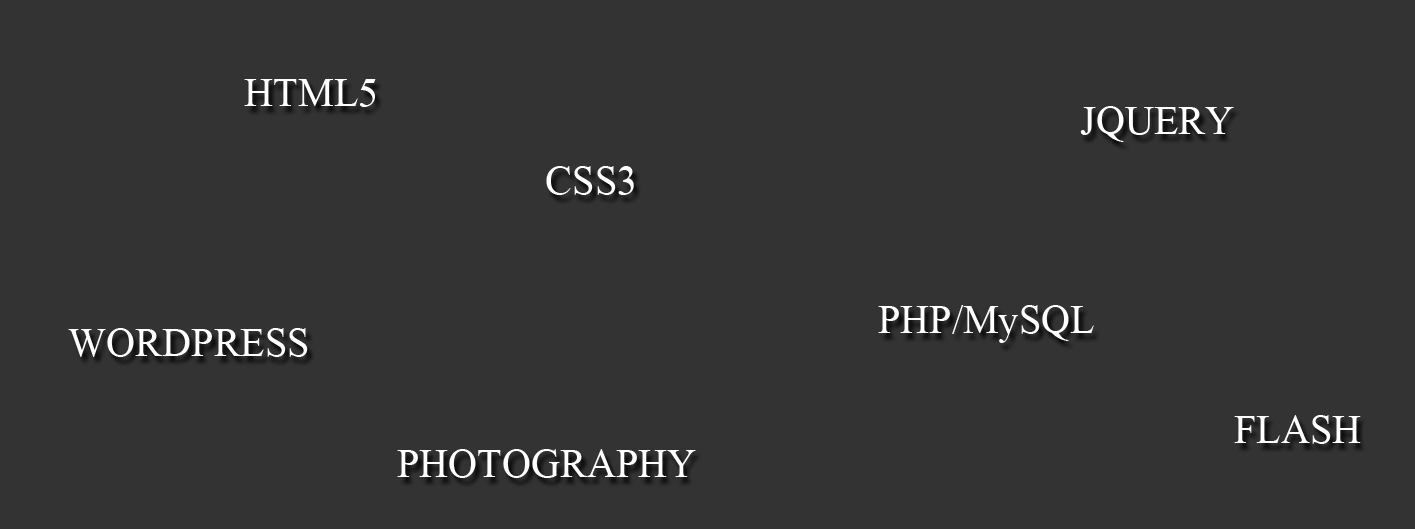
<style>
.page{position:relative;width:1415px;height:529px;background:#333333}
.page>*{position:absolute;margin:0}
.t1{font:60px "MicrosoftHimalaya";color:#ffffff}
</style>
<div class="page">
<p class="t1" style="left:244px;top:79px;width:132px;height:28px">HTML5</p>
<p class="t1" style="left:1080px;top:106px;width:154px;height:36px">JQUERY</p>
<p class="t1" style="left:546px;top:166px;width:88px;height:29px">CSS3</p>
<p class="t1" style="left:878px;top:305px;width:216px;height:38px">PHP/MySQL</p>
<p class="t1" style="left:68px;top:328px;width:240px;height:29px">WORDPRESS</p>
<p class="t1" style="left:1234px;top:415px;width:127px;height:29px">FLASH</p>
<p class="t1" style="left:397px;top:449px;width:299px;height:29px">PHOTOGRAPHY</p>
</div>
